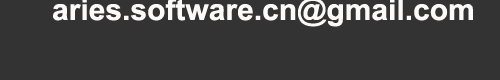
<style>
.page{position:relative;width:500px;height:80px;background:#333333}
.page>*{position:absolute;margin:0}
.t1{font:30px "Arial-BoldMT";color:#fcf9f9}
</style>
<div class="page">
<p class="t1" style="left:53px;top:0px;width:420px;height:27px">aries.software.cn@gmail.com</p>
</div>
